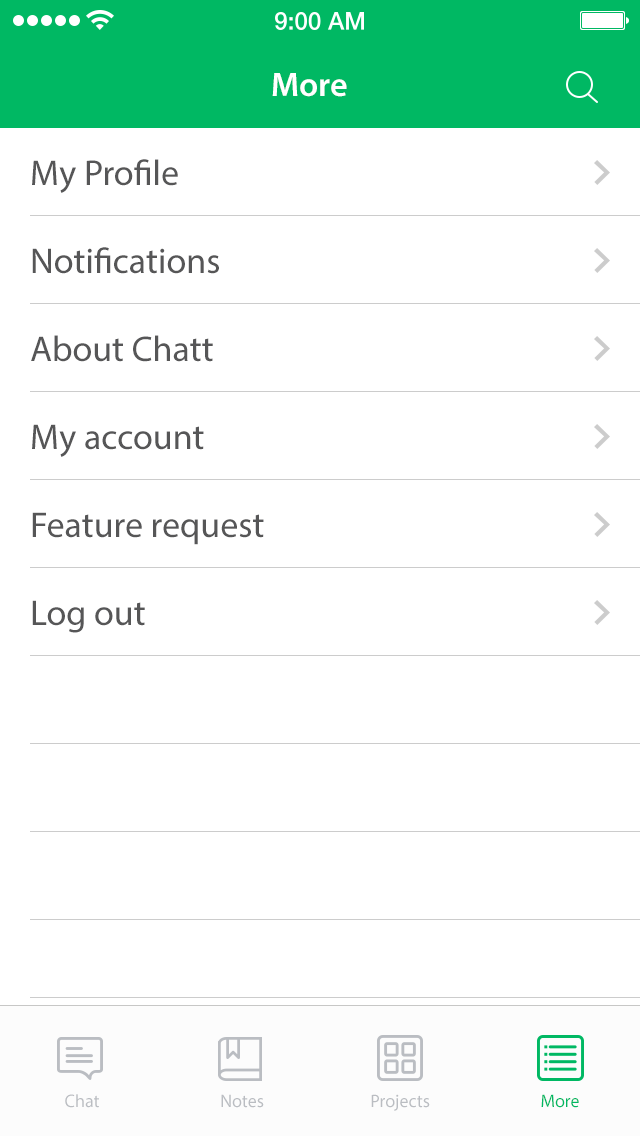
<style>
.page{position:relative;width:640px;height:1136px;background:#ffffff}
.page>*{position:absolute;margin:0}
.t1{font:34px "MyriadPro-Semibold";color:#ffffff}
.t2{font:36px/88px "MyriadPro-Regular";color:#565657}
.t3{font:18px "MyriadPro-Regular";color:#babdc2}
.t4{font:18px "MyriadPro-Regular";color:#00b863}
</style>
<div class="page">
<p class="t1" style="left:272px;top:73px;width:75px;height:24px">More</p>
<p class="t2" style="left:31px;top:159px;width:233px;height:474px">My Profile<br>Notifications<br>About Chatt<br>My account<br>Feature request<br>Log out</p>
<p class="t3" style="left:65px;top:1094px;width:34px;height:14px">Chat</p>
<p class="t3" style="left:221px;top:1094px;width:43px;height:14px">Notes</p>
<p class="t3" style="left:371px;top:1094px;width:59px;height:17px">Projects</p>
<p class="t4" style="left:541px;top:1094px;width:38px;height:14px">More</p>
</div>
